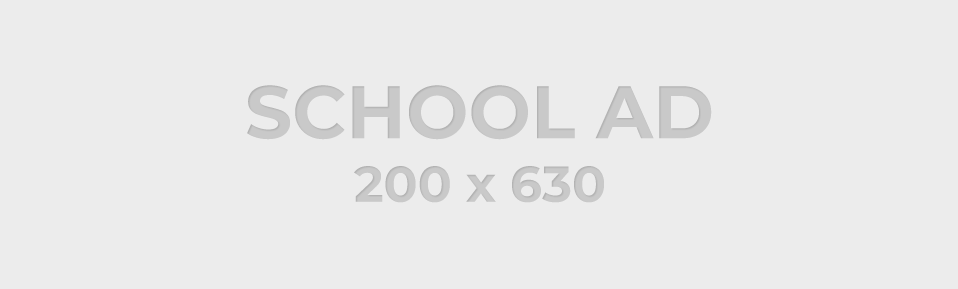
<style>
.page{position:relative;width:958px;height:289px;background:#ececec}
.page>*{position:absolute;margin:0}
.t1{font:74.4px "Montserrat-Bold";color:#c9c9c9}
.t2{font:50.2px "Montserrat-Bold";color:#c9c9c9}
</style>
<div class="page">
<p class="t1" style="left:247px;top:85px;width:465px;height:55px">SCHOOL AD</p>
<p class="t2" style="left:354px;top:166px;width:250px;height:37px">200 x 630</p>
</div>
